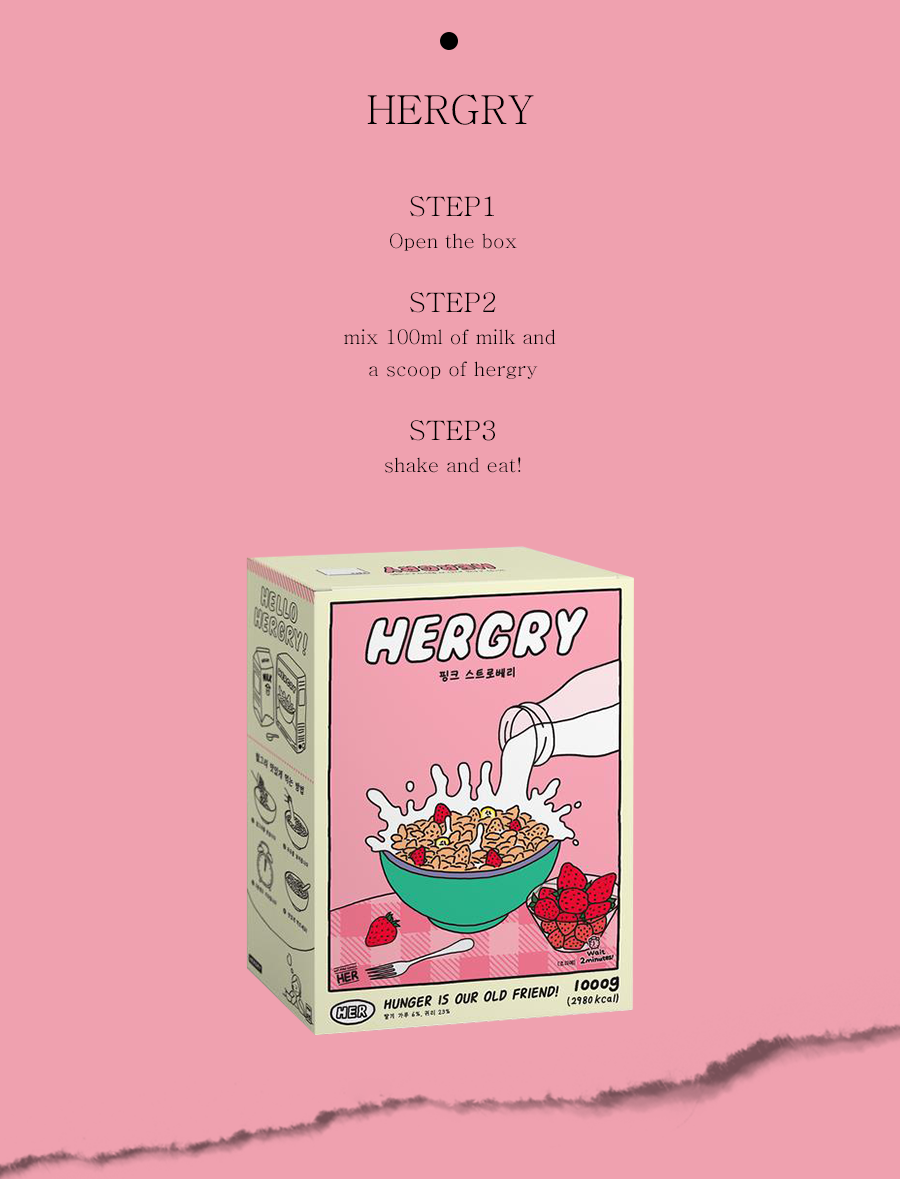
<style>
.page{position:relative;width:900px;height:1179px;background:#efa1af}
.page>*{position:absolute;margin:0}
.t1{font:40px "Batang";color:#000000}
.t2{font:20px/32px "Batang";color:#000000}
.t3{font:26.7px/32px "Batang";color:#000000}
</style>
<div class="page">
<p class="t1" style="left:367px;top:94px;width:167px;height:31px">HERGRY</p>
<p class="t2" style="left:344px;top:196px;width:212px;height:277px;text-align:center"><span class="t3">STEP1<br></span>Open the box<br><br><span class="t3">STEP2<br></span>mix 100ml of milk and <br>a scoop of hergry<br><br><span class="t3">STEP3<br></span>shake and eat!</p>
</div>
